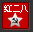
<style>
.page{position:relative;width:33px;height:32px;background:#c50000}
.page>*{position:absolute;margin:0}
.t1{font:10.4px "SimSun";letter-spacing:-0.25em;color:#ffffff}
</style>
<div class="page">
<p class="t1" style="left:4px;top:5px;width:24px;height:8px">红二八</p>
</div>
